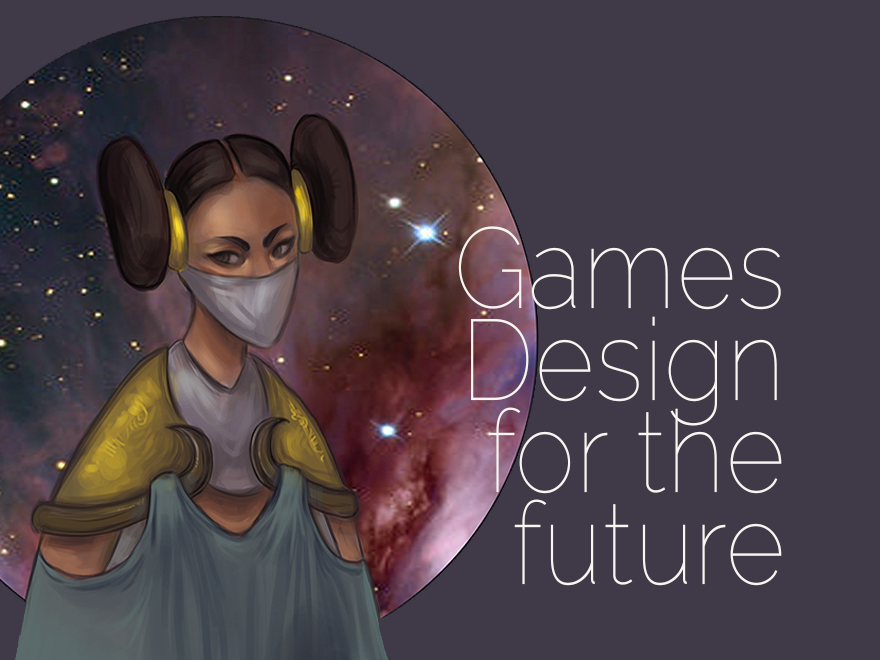
<style>
.page{position:relative;width:880px;height:660px;background:#3f3948}
.page>*{position:absolute;margin:0}
.t1{font:114px/92px "Raleway-ExtraBold";letter-spacing:0.012em;color:#f8f6f2;scale:0.89 1}
</style>
<div class="page">
<p class="t1" style="left:458px;top:226px;width:324px;height:360px;text-align:right">Games<br>Design<br>for the<br>future</p>
</div>
